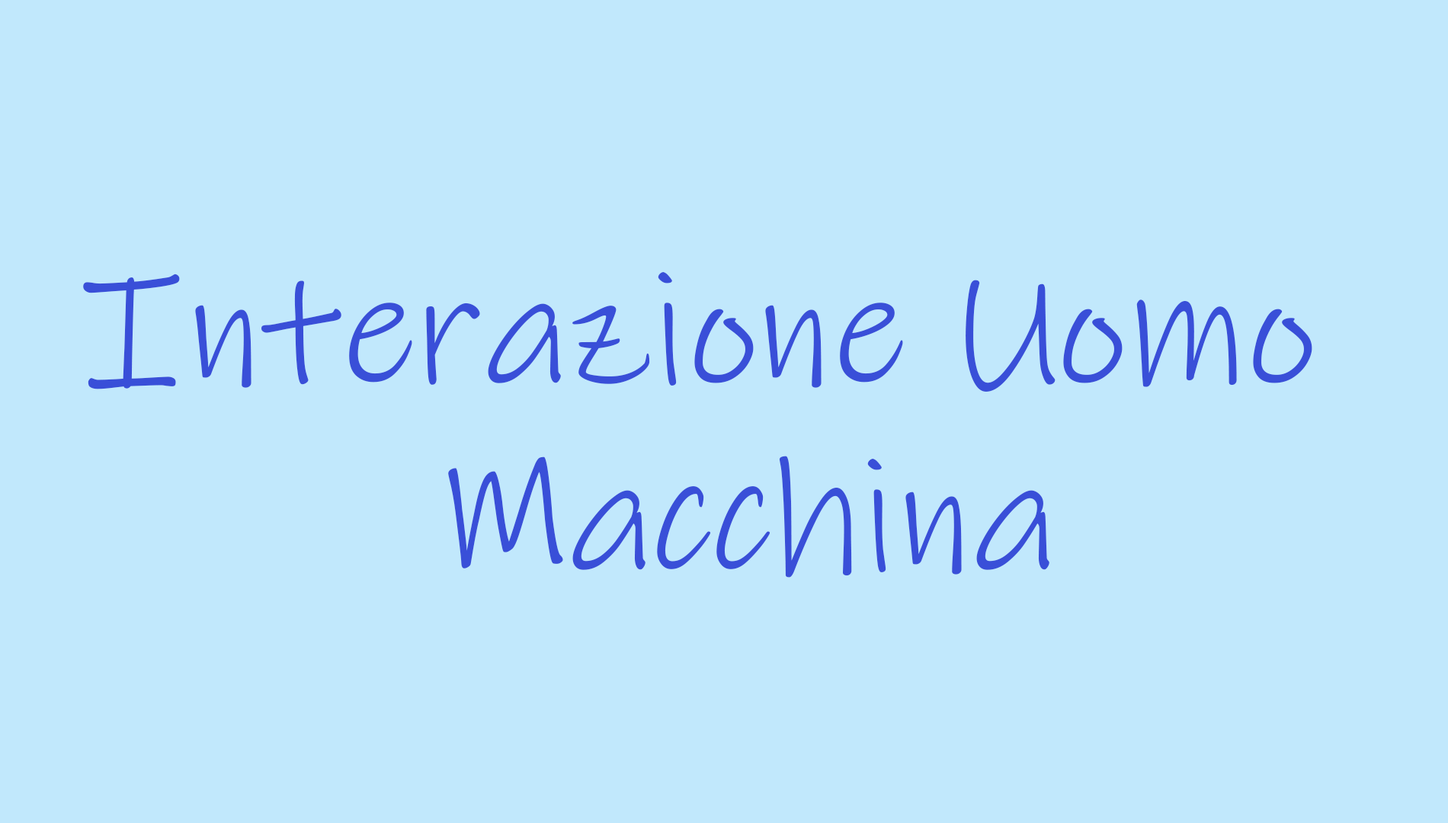
<style>
.page{position:relative;width:1448px;height:823px;background:#c1e8fc}
.page>*{position:absolute;margin:0}
.t1{font:161.4px "InkFree";color:#394fd8}
</style>
<div class="page">
<p class="t1" style="left:83px;top:272px;width:1230px;height:120px">Interazione Uomo</p>
<p class="t1" style="left:448px;top:456px;width:602px;height:122px">Macchina</p>
</div>
